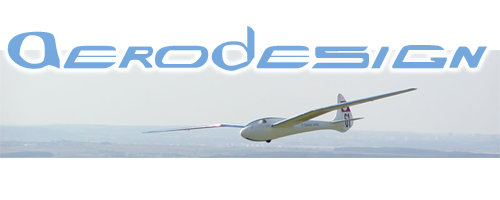
<style>
.page{position:relative;width:500px;height:200px;background:#ffffff}
.page>*{position:absolute;margin:0}
.t1{font:47px "Seaquest";color:#6ca3db}
</style>
<div class="page">
<p class="t1" style="left:7px;top:25px;width:480px;height:46px;opacity:0.93">AeroDesign</p>
</div>
